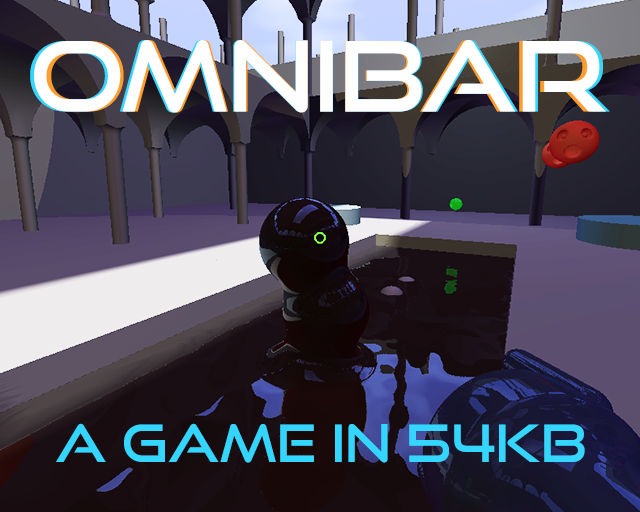
<style>
.page{position:relative;width:640px;height:512px}
.page>*{position:absolute;margin:0}
.t1{font:97.1px "GoodTimesRg-Regular";color:#ffffff}
.t2{font:51.8px "GoodTimesRg-Regular";color:#34d6ff}
</style>
<div class="page">
<p class="t1" style="left:30px;top:40px;width:580px;height:73px">Omnibar</p>
<p class="t1" style="left:34px;top:40px;width:572px;height:73px">Omnibar</p>
<p class="t1" style="left:39px;top:40px;width:562px;height:73px">Omnibar</p>
<p class="t2" style="left:56px;top:423px;width:529px;height:40px">A game in 54kb</p>
</div>
